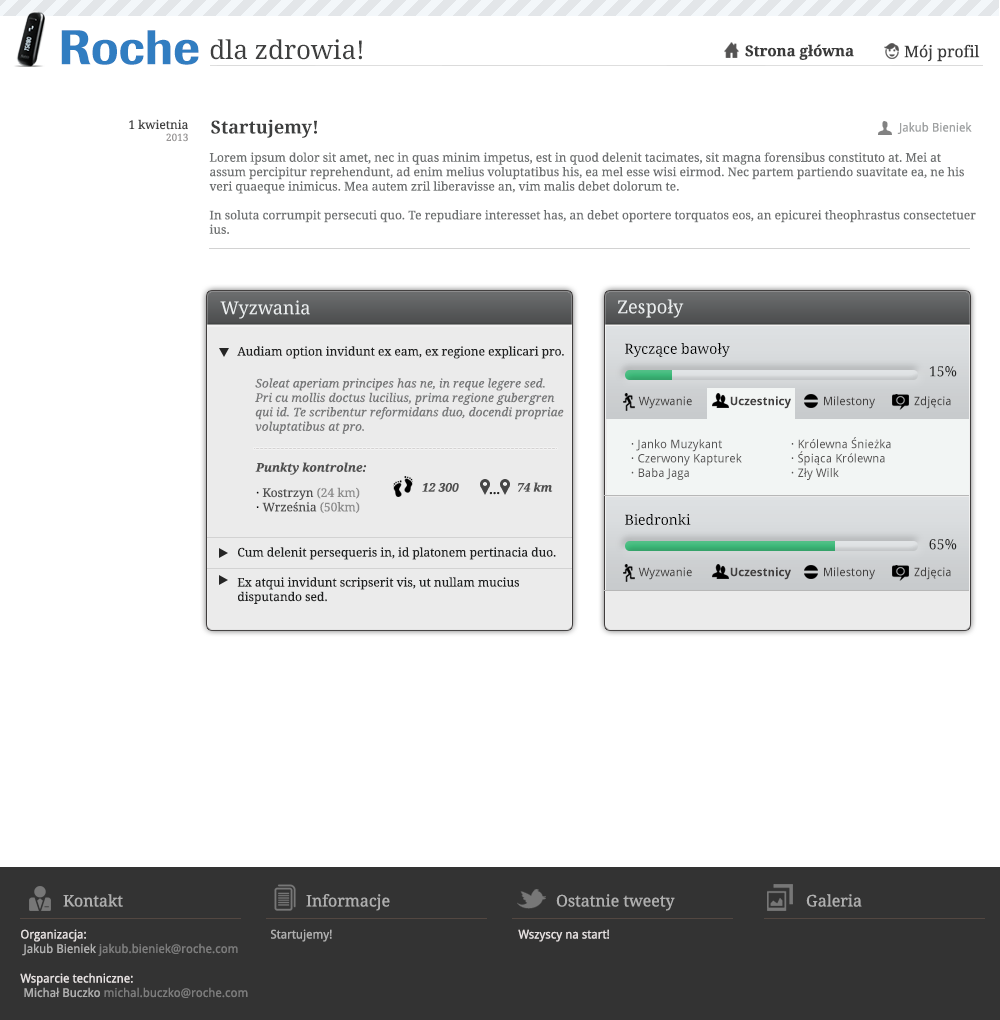
<style>
.page{position:relative;width:1000px;height:1020px;background:#ffffff}
.page>*{position:absolute;margin:0}
.t1{font:48px "Imago-Medium";color:#317dc1}
.t2{font:26px "DroidSerif";color:#3e3f3f}
.t3{font:15px "DroidSerif-Bold";color:#3b3b3b}
.t4{font:16px "DroidSerif";color:#3b3b3b}
.t5{font:12px "DroidSerif";color:#424242}
.t6{font:10px "DroidSerif";color:#979595}
.t7{font:18px "DroidSerif-Bold";color:#3e3f3f}
.t8{font:12px "DroidSans";color:#9fa1a2}
.t9{font:12px "DroidSerif";color:#6e7071}
.t10{font:18px "DroidSerif";color:#eaedee}
.t11{font:12px "DroidSerif";color:#202121}
.t12{font:14px "DroidSerif";color:#000000}
.t13{font:14px "DroidSerif";color:#262626}
.t14{font:12px "DroidSerif-Italic";color:#777879}
.t15{font:12px "DroidSans";color:#403e3e}
.t16{font:12px "DroidSans-Bold";color:#403e3e}
.t17{font:12px "DroidSans";color:#565454}
.t18{font:12px "DroidSerif-BoldItalic";color:#505050}
.t19{font:12px "DroidSerif";color:#505050}
.t20{font:12px "DroidSerif";color:#000000}
.t21{font:12px "DroidSerif";color:#8c8c8c}
.t22{font:16px "DroidSerif";color:#afafaf}
.t23{font:12px "DroidSans";color:#7d7d7d}
.t24{font:12px "DroidSans";color:#e6e1e1}
.t25{font:12px "DroidSans";color:#afafaf}
</style>
<div class="page">
<p class="t1" style="left:61px;top:30px;width:138px;height:35px">Roche</p>
<p class="t2" style="left:210px;top:39px;width:152px;height:21px">dla zdrowia!</p>
<p class="t3" style="left:745px;top:44px;width:109px;height:16px">Strona główna</p>
<p class="t4" style="left:904px;top:44px;width:76px;height:18px">Mój profil</p>
<p class="t5" style="left:129px;top:119px;width:59px;height:23px;text-align:right">1 kwietnia<br>      <span class="t6">2013</span></p>
<p class="t7" style="left:211px;top:119px;width:106px;height:19px">Startujemy!</p>
<p class="t8" style="left:897px;top:122px;width:75px;height:12px">Jakub Bieniek</p>
<p class="t9" style="left:209px;top:152px;width:767px;height:82px">Lorem ipsum dolor sit amet, nec in quas minim impetus, est in quod delenit tacimates, sit magna forensibus constituto at. Mei at <br>assum percipitur reprehendunt, ad enim melius voluptatibus his, ea mel esse wisi eirmod. Nec partem partiendo suavitate ea, ne his <br>veri quaeque inimicus. Mea autem zril liberavisse an, vim malis debet dolorum te. <br><br>In soluta corrumpit persecuti quo. Te repudiare interesset has, an debet oportere torquatos eos, an epicurei theophrastus consectetuer <br>ius.</p>
<p class="t10" style="left:220px;top:300px;width:90px;height:19px">Wyzwania</p>
<p class="t10" style="left:618px;top:299px;width:66px;height:19px">Zespoły</p>
<p class="t11" style="left:237px;top:346px;width:327px;height:13px">Audiam option invidunt ex eam, ex regione explicari pro.</p>
<p class="t12" style="left:625px;top:343px;width:105px;height:14px">Ryczące bawoły</p>
<p class="t13" style="left:929px;top:366px;width:28px;height:11px">15%</p>
<p class="t14" style="left:255px;top:378px;width:309px;height:56px">Soleat aperiam principes has ne, in reque legere sed. <br>Pri cu mollis doctus lucilius, prima regione gubergren <br>qui id. Te scribentur reformidans duo, docendi propriae <br>voluptatibus at pro.</p>
<p class="t15" style="left:638px;top:396px;width:54px;height:13px">Wyzwanie</p>
<p class="t16" style="left:730px;top:396px;width:61px;height:13px">Uczestnicy</p>
<p class="t15" style="left:824px;top:396px;width:51px;height:13px">Milestony</p>
<p class="t15" style="left:914px;top:396px;width:37px;height:13px">Zdjęcia</p>
<p class="t17" style="left:791px;top:437px;width:100px;height:43px">· Królewna Śnieżka<br>· Śpiąca Królewna<br>· Zły Wilk</p>
<p class="t17" style="left:631px;top:439px;width:111px;height:41px">· Janko Muzykant<br>· Czerwony Kapturek<br>· Baba Jaga</p>
<p class="t18" style="left:255px;top:462px;width:112px;height:13px">Punkty kontrolne:</p>
<p class="t18" style="left:422px;top:483px;width:37px;height:9px">12 300</p>
<p class="t18" style="left:518px;top:482px;width:35px;height:10px">74 km</p>
<p class="t19" style="left:256px;top:487px;width:104px;height:26px"><span class="t20">·</span> Kostrzyn <span class="t21">(24 km)<br></span><span class="t20">·</span> Września <span class="t21">(50km)</span></p>
<p class="t12" style="left:625px;top:514px;width:66px;height:11px">Biedronki</p>
<p class="t13" style="left:929px;top:539px;width:28px;height:11px">65%</p>
<p class="t11" style="left:238px;top:547px;width:318px;height:13px">Cum delenit persequeris in, id platonem pertinacia duo.</p>
<p class="t15" style="left:638px;top:567px;width:54px;height:13px">Wyzwanie</p>
<p class="t16" style="left:730px;top:567px;width:61px;height:13px">Uczestnicy</p>
<p class="t15" style="left:824px;top:567px;width:51px;height:13px">Milestony</p>
<p class="t15" style="left:914px;top:567px;width:37px;height:13px">Zdjęcia</p>
<p class="t11" style="left:237px;top:577px;width:282px;height:27px">Ex atqui invidunt scripserit vis, ut nullam mucius <br>disputando sed.</p>
<p class="t22" style="left:63px;top:894px;width:60px;height:13px">Kontakt</p>
<p class="t22" style="left:306px;top:894px;width:84px;height:17px">Informacje</p>
<p class="t22" style="left:556px;top:894px;width:119px;height:17px">Ostatnie tweety</p>
<p class="t22" style="left:806px;top:894px;width:56px;height:13px">Galeria</p>
<p class="t23" style="left:21px;top:929px;width:217px;height:27px"><span class="t24">Organizacja: <br></span><span class="t25"> Jakub Bieniek </span>jakub.bieniek@roche.com</p>
<p class="t25" style="left:271px;top:929px;width:61px;height:13px">Startujemy!</p>
<p class="t24" style="left:518px;top:929px;width:91px;height:13px">Wszyscy na start!</p>
<p class="t23" style="left:20px;top:973px;width:228px;height:25px"><span class="t24">Wsparcie techniczne: <br></span><span class="t25"> Michał Buczko </span>michal.buczko@roche.com</p>
</div>
